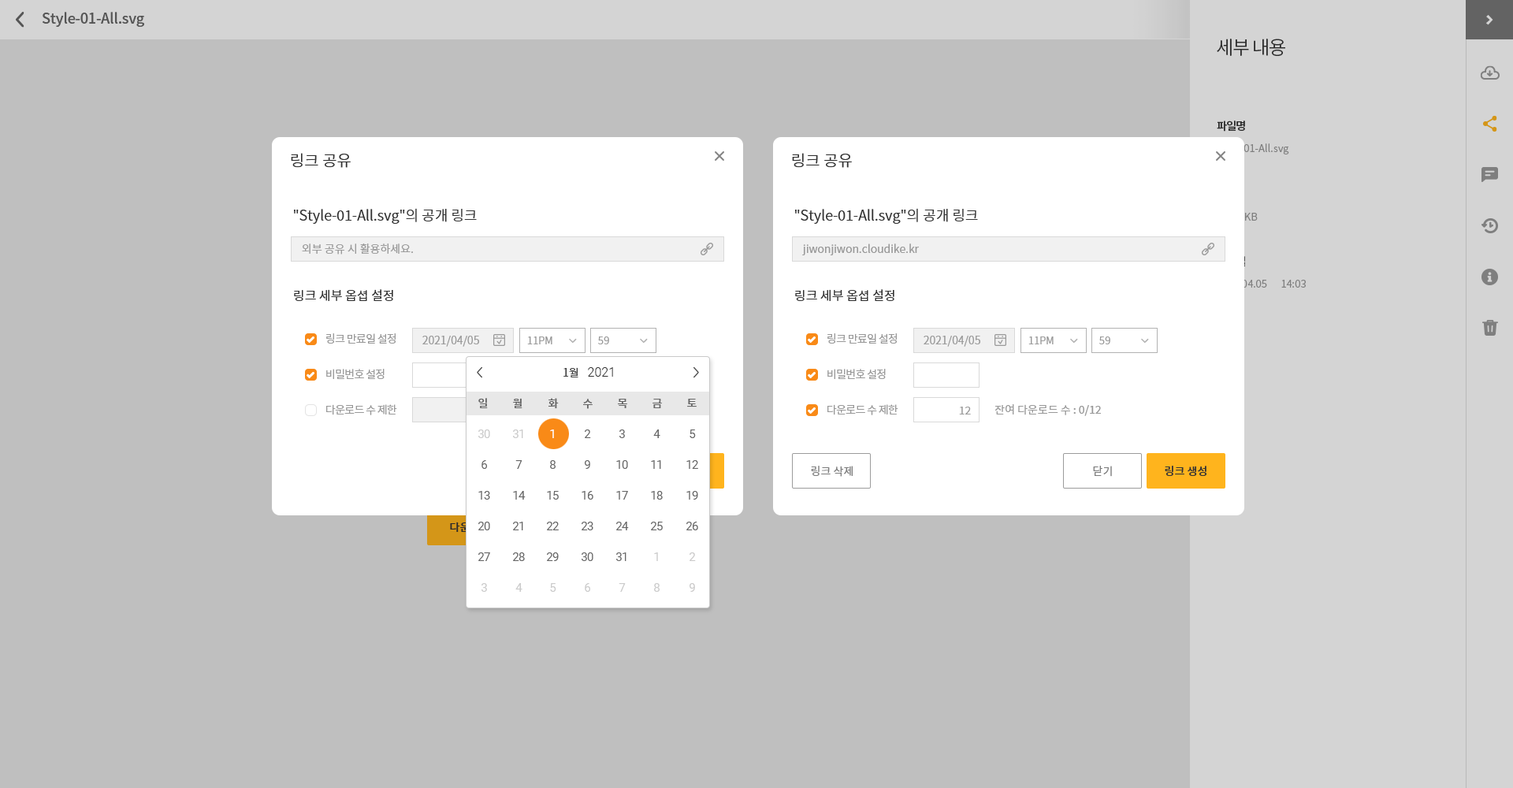
<style>
.page{position:relative;width:1513px;height:788px;background:#bfbfbf}
.page>*{position:absolute;margin:0}
.t1{font:15.8px "NotoSansCJKkr-DemiLight";color:#333333}
.t2{font:14.2px "NotoSansCJKkr-DemiLight";color:#333333}
.t3{font:11px "NotoSansCJKkr-DemiLight";color:#999999}
.t4{font:12.6px "NotoSansCJKkr-Regular";color:#333333}
.t5{font:11px "NotoSansCJKkr-Regular";letter-spacing:-0.05em;color:#999999}
.t6{font:10.2px "NotoSansCJKkr-DemiLight";color:#999999}
.t7{font:11px "NotoSansCJKkr-DemiLight";color:#333333}
.t8{font:12.6px "Roboto-Light";color:#333333}
.t9{font:11px "NotoSansCJKkr-Medium";color:#666666}
.t10{font:11px "NotoSansCJKkr-Regular";color:#999999}
.t11{font:11.8px/30.7px "Roboto-Regular";letter-spacing:-0.025em;color:#666666}
.t12{font:11.8px/30.7px "Roboto-Regular";letter-spacing:-0.025em;color:#cbcbcb}
.t13{font:11.8px/30.7px "Roboto-Regular";letter-spacing:-0.025em;color:#fefefe}
.t14{font:11.8px/30.7px "Roboto-Regular";letter-spacing:-0.025em;color:#cbcaca}
.t15{font:11px "NotoSansCJKkr-Regular";color:#7b7b7b}
.t16{font:11px "NotoSansCJKkr-Medium";color:#333333}
</style>
<div class="page">
<p class="t1" style="left:291px;top:153px;width:60px;height:15px">링크 공유</p>
<p class="t1" style="left:792px;top:153px;width:60px;height:15px">링크 공유</p>
<p class="t2" style="left:294px;top:208px;width:183px;height:16px">"Style-01-All.svg"의 공개 링크</p>
<p class="t2" style="left:795px;top:208px;width:183px;height:16px">"Style-01-All.svg"의 공개 링크</p>
<p class="t3" style="left:302px;top:244px;width:111px;height:11px">외부 공유 시 활용하세요.</p>
<p class="t3" style="left:802px;top:244px;width:117px;height:11px">jiwonjiwon.cloudike.kr</p>
<p class="t4" style="left:294px;top:289px;width:99px;height:12px">링크 세부 옵셥 설정</p>
<p class="t4" style="left:795px;top:289px;width:99px;height:12px">링크 세부 옵셥 설정</p>
<p class="t5" style="left:326px;top:333px;width:70px;height:11px">링크 만료일 설정</p>
<p class="t3" style="left:422px;top:336px;width:57px;height:11px">2021/04/05</p>
<p class="t6" style="left:527px;top:337px;width:25px;height:7px">11PM</p>
<p class="t6" style="left:598px;top:337px;width:11px;height:7px">59</p>
<p class="t5" style="left:827px;top:333px;width:70px;height:11px">링크 만료일 설정</p>
<p class="t3" style="left:924px;top:336px;width:56px;height:11px">2021/04/05</p>
<p class="t6" style="left:1028px;top:337px;width:26px;height:7px">11PM</p>
<p class="t6" style="left:1099px;top:337px;width:11px;height:7px">59</p>
<p class="t5" style="left:326px;top:369px;width:59px;height:10px">비밀번호 설정</p>
<p class="t7" style="left:563px;top:367px;width:15px;height:10px">1월</p>
<p class="t8" style="left:588px;top:367px;width:25px;height:10px">2021</p>
<p class="t5" style="left:827px;top:369px;width:59px;height:10px">비밀번호 설정</p>
<p class="t9" style="left:478px;top:398px;width:10px;height:10px">일</p>
<p class="t9" style="left:513px;top:398px;width:9px;height:10px">월</p>
<p class="t9" style="left:548px;top:398px;width:11px;height:11px">화</p>
<p class="t9" style="left:583px;top:399px;width:10px;height:10px">수</p>
<p class="t9" style="left:618px;top:399px;width:9px;height:9px">목</p>
<p class="t9" style="left:653px;top:399px;width:9px;height:9px">금</p>
<p class="t9" style="left:687px;top:399px;width:10px;height:8px">토</p>
<p class="t5" style="left:326px;top:404px;width:71px;height:11px">다운로드 수 제한</p>
<p class="t5" style="left:827px;top:404px;width:71px;height:11px">다운로드 수 제한</p>
<p class="t3" style="left:959px;top:407px;width:12px;height:8px">12</p>
<p class="t10" style="left:995px;top:404px;width:106px;height:12px">잔여 다운로드 수 : 0/12</p>
<p class="t11" style="left:478px;top:429px;width:12px;height:163px;text-align:center"><span class="t12">30<br></span>6<br>13<br>20<br>27<br><span class="t12">3</span></p>
<p class="t11" style="left:513px;top:429px;width:13px;height:163px;text-align:center"><span class="t12">31<br></span>7<br>14<br>21<br>28<br><span class="t12">4</span></p>
<p class="t11" style="left:547px;top:429px;width:12px;height:163px;text-align:center"><span class="t13">1<br></span>8<br>15<br>22<br>29<br><span class="t12">5</span></p>
<p class="t11" style="left:582px;top:429px;width:11px;height:163px;text-align:center">2<br>9<br>16<br>23<br>30<br><span class="t12">6</span></p>
<p class="t11" style="left:616px;top:429px;width:13px;height:163px;text-align:center">3<br>10<br>17<br>24<br>31<br><span class="t12">7</span></p>
<p class="t11" style="left:651px;top:429px;width:12px;height:163px;text-align:center">4<br>11<br>18<br>25<br><span class="t12">1<br>8</span></p>
<p class="t11" style="left:686px;top:429px;width:12px;height:163px;text-align:center">5<br>12<br>19<br>26<br><span class="t14">2<br>9</span></p>
<p class="t15" style="left:811px;top:466px;width:42px;height:11px">링크 삭제</p>
<p class="t15" style="left:1093px;top:466px;width:19px;height:11px">닫기</p>
<p class="t16" style="left:1165px;top:466px;width:42px;height:10px">링크 생성</p>
</div>
